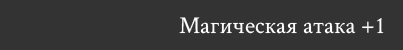
<style>
.page{position:relative;width:403px;height:50px;background:#333333}
.page>*{position:absolute;margin:0}
.t1{font:24px "CrimsonText-Regular";color:#ffffff}
</style>
<div class="page">
<p class="t1" style="left:179px;top:17px;width:205px;height:17px">Магическая атака +1</p>
</div>
